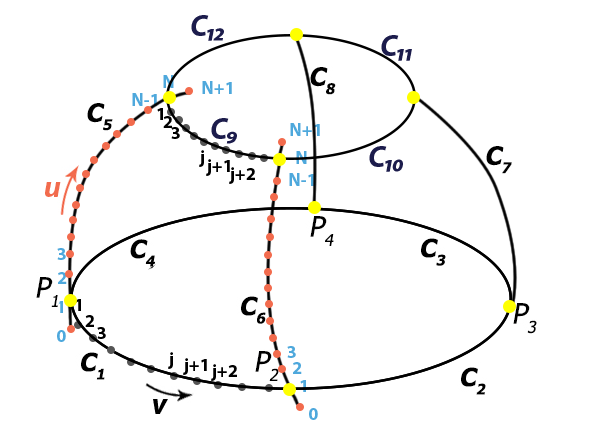
<style>
.page{position:relative;width:593px;height:446px;background:#ffffff}
.page>*{position:absolute;margin:0}
.t1{font:30px "MyriadPro-BoldIt";color:#1c1c4c}
.t2{font:18px "MyriadPro-Bold";color:#4ea8dc}
.t3{font:18px "MyriadPro-Bold";color:#000000}
.t4{font:30px "MyriadPro-BoldIt";color:#f26b4d}
.t5{font:30px "MyriadPro-BoldIt";color:#000000}
</style>
<div class="page">
<p class="t1" style="left:191px;top:15px;width:33px;height:26px">C12</p>
<p class="t1" style="left:381px;top:35px;width:31px;height:26px">C11</p>
<p class="t2" style="left:163px;top:75px;width:11px;height:13px">N</p>
<p class="t2" style="left:202px;top:81px;width:30px;height:13px">N+1</p>
<p class="t2" style="left:132px;top:93px;width:25px;height:13px">N-1</p>
<p class="t3" style="left:157px;top:108px;width:6px;height:12px">1</p>
<p class="t3" style="left:163px;top:116px;width:9px;height:12px">2</p>
<p class="t1" style="left:211px;top:118px;width:26px;height:26px">C9</p>
<p class="t2" style="left:290px;top:123px;width:30px;height:13px">N+1</p>
<p class="t3" style="left:171px;top:127px;width:9px;height:12px">3</p>
<p class="t3" style="left:199px;top:150px;width:5px;height:17px">j</p>
<p class="t1" style="left:369px;top:146px;width:34px;height:26px">C10</p>
<p class="t3" style="left:206px;top:159px;width:24px;height:17px">j+1</p>
<p class="t2" style="left:296px;top:151px;width:11px;height:13px">N</p>
<p class="t3" style="left:229px;top:167px;width:26px;height:17px">j+2</p>
<p class="t2" style="left:289px;top:173px;width:25px;height:13px">N-1</p>
<p class="t4" style="left:45px;top:182px;width:16px;height:15px">u</p>
<p class="t2" style="left:57px;top:248px;width:9px;height:12px">3</p>
<p class="t2" style="left:58px;top:272px;width:9px;height:12px">2</p>
<p class="t2" style="left:57px;top:301px;width:6px;height:12px">1</p>
<p class="t3" style="left:75px;top:299px;width:6px;height:12px">1</p>
<p class="t3" style="left:85px;top:315px;width:9px;height:12px">2</p>
<p class="t3" style="left:97px;top:327px;width:9px;height:12px">3</p>
<p class="t2" style="left:57px;top:330px;width:9px;height:12px">0</p>
<p class="t3" style="left:168px;top:352px;width:5px;height:17px">j</p>
<p class="t2" style="left:287px;top:346px;width:9px;height:12px">3</p>
<p class="t3" style="left:183px;top:358px;width:24px;height:17px">j+1</p>
<p class="t3" style="left:211px;top:364px;width:26px;height:17px">j+2</p>
<p class="t2" style="left:293px;top:362px;width:9px;height:12px">2</p>
<p class="t2" style="left:300px;top:380px;width:6px;height:12px">1</p>
<p class="t5" style="left:153px;top:399px;width:15px;height:15px">v</p>
<p class="t2" style="left:309px;top:408px;width:9px;height:12px">0</p>
</div>
